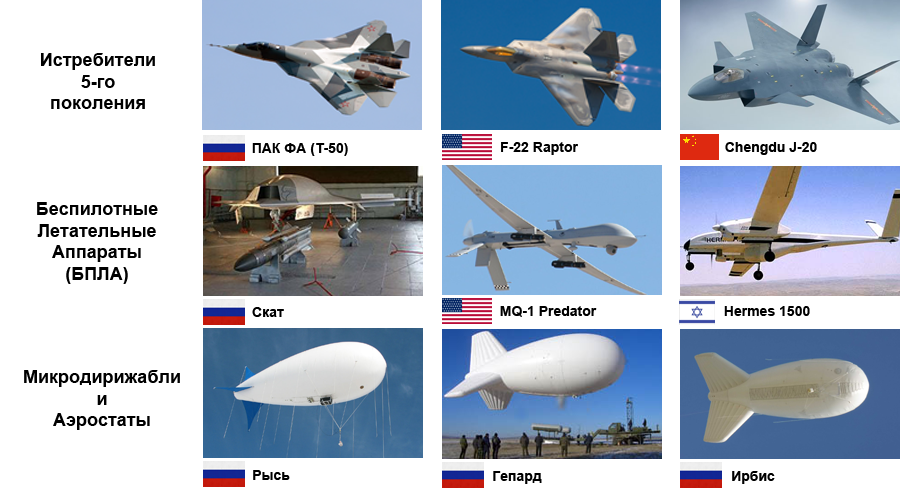
<style>
.page{position:relative;width:900px;height:491px;background:#ffffff}
.page>*{position:absolute;margin:0}
.t1{font:18px "Arial-BoldMT";color:#000000}
.t2{font:14px "Arial-BoldMT";color:#000000}
</style>
<div class="page">
<p class="t1" style="left:41px;top:53px;width:114px;height:56px;text-align:center">Истребители<br>5-го<br>поколения</p>
<p class="t2" style="left:252px;top:143px;width:96px;height:13px">ПАК ФА (Т-50)</p>
<p class="t2" style="left:501px;top:142px;width:77px;height:13px">F-22 Raptor</p>
<p class="t2" style="left:725px;top:142px;width:92px;height:13px">Chengdu J-20</p>
<p class="t1" style="left:37px;top:202px;width:121px;height:82px;text-align:center">Беспилотные<br>Летательные<br>Аппараты<br>(БПЛА)</p>
<p class="t2" style="left:252px;top:307px;width:32px;height:10px">Скат</p>
<p class="t2" style="left:500px;top:306px;width:97px;height:11px">MQ-1 Predator</p>
<p class="t2" style="left:724px;top:306px;width:86px;height:10px">Hermes 1500</p>
<p class="t1" style="left:24px;top:370px;width:156px;height:60px;text-align:center">Микродирижабли<br>и<br>Аэростаты</p>
<p class="t2" style="left:253px;top:470px;width:37px;height:10px">Рысь</p>
<p class="t2" style="left:493px;top:471px;width:49px;height:13px">Гепард</p>
<p class="t2" style="left:732px;top:471px;width:43px;height:13px">Ирбис</p>
</div>
